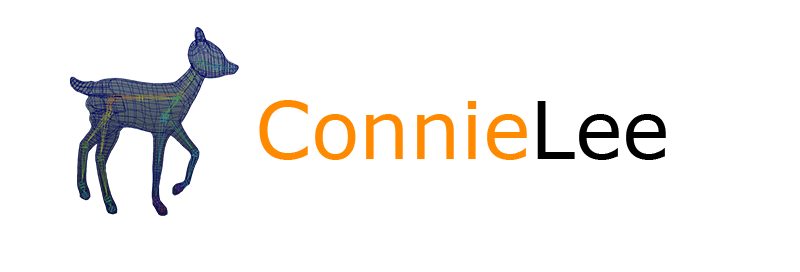
<style>
.page{position:relative;width:800px;height:272px;background:#ffffff}
.page>*{position:absolute;margin:0}
.t1{font:80px "Verdana";color:#ff8a00}
.t2{font:80px "Verdana";color:#000000}
</style>
<div class="page">
<p class="t1" style="left:259px;top:100px;width:407px;height:60px">Connie<span class="t2">Lee</span></p>
</div>
